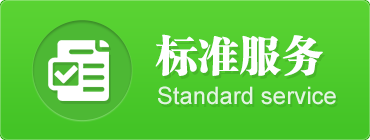
<style>
.page{position:relative;width:370px;height:140px}
.page>*{position:absolute;margin:0}
.t1{font:42px "FZCSJW--GB1-0";color:#ffffff}
.t2{font:24px "ArialMT";color:#e3f4e0}
</style>
<div class="page">
<p class="t1" style="left:155px;top:34px;width:168px;height:42px">标准服务</p>
<p class="t2" style="left:158px;top:86px;width:178px;height:19px">Standard service</p>
</div>
